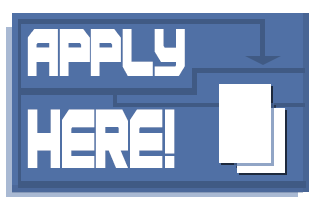
<style>
.page{position:relative;width:320px;height:200px;background:#5070a5}
.page>*{position:absolute;margin:0}
.t1{font:70.8px "Rebirth-Ultra";color:#ffffff;scale:0.6 1}
.t2{font:87.9px "Rebirth-Ultra";color:#ffffff;scale:0.53 1}
</style>
<div class="page">
<p class="t1" style="left:27px;top:29px;width:158px;height:47px">APPLY</p>
<p class="t2" style="left:27px;top:109px;width:148px;height:59px">HERE!</p>
</div>
